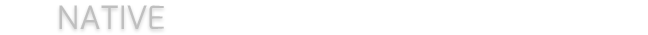
<style>
.page{position:relative;width:648px;height:35px;background:#ffffff}
.page>*{position:absolute;margin:0}
.t1{font:32px "Exo-Regular";color:#bfbfbf;text-transform:uppercase}
</style>
<div class="page">
<p class="t1" style="left:59px;top:5px;width:105px;height:24px">native</p>
</div>
